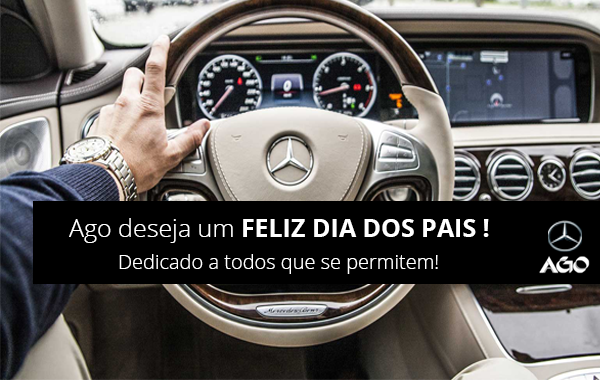
<style>
.page{position:relative;width:600px;height:380px}
.page>*{position:absolute;margin:0}
.t1{font:25px "OpenSans-Bold";color:#ffffff}
.t2{font:25px "OpenSans-Light";color:#ffffff}
.t3{font:20px "OpenSans-Light";color:#ffffff}
</style>
<div class="page">
<p class="t1" style="left:69px;top:218px;width:420px;height:25px"><span class="t2">Ago deseja um </span>FELIZ DIA DOS PAIS !</p>
<p class="t3" style="left:119px;top:254px;width:319px;height:20px">Dedicado a todos que se permitem!</p>
</div>
